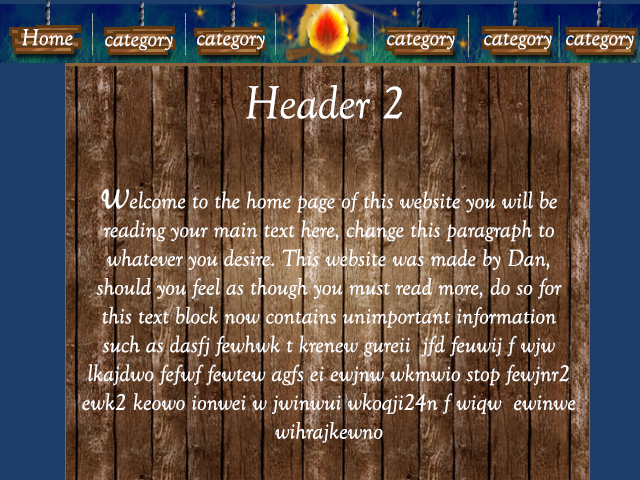
<style>
.page{position:relative;width:640px;height:480px}
.page>*{position:absolute;margin:0}
.t1{font:24px "GoudyOldStyleT-Italic";color:#ffffff}
.t2{font:48px "GoudyOldStyleT-Italic";color:#ffffff}
</style>
<div class="page">
<p class="t1" style="left:22px;top:29px;width:51px;height:17px">Home</p>
<p class="t1" style="left:105px;top:34px;width:68px;height:17px">category</p>
<p class="t1" style="left:197px;top:33px;width:68px;height:17px">category</p>
<p class="t1" style="left:387px;top:33px;width:68px;height:17px">category</p>
<p class="t1" style="left:484px;top:33px;width:68px;height:17px">category</p>
<p class="t1" style="left:566px;top:33px;width:68px;height:17px">category</p>
<p class="t2" style="left:246px;top:84px;width:156px;height:35px">Header 2</p>
<p class="t1" style="left:82px;top:189px;width:494px;height:254px;text-align:center"><span class="t2">w</span>elcome to the home page of this website you will be reading your main text here, change this paragraph to whatever you desire. This website was made by Dan, should you feel as though you must read more, do so for this text block now contains unimportant information such as dasfj fewhwk t krenew gureii  jfd feuwij f wjw lkajdwo fefwf fewtew agfs ei ewjnw wkmwio stop fewjnr2 ewk2 keowo ionwei w jwinwui wkoqji24n f wiqw  ewinwe wihrajkewno</p>
</div>
